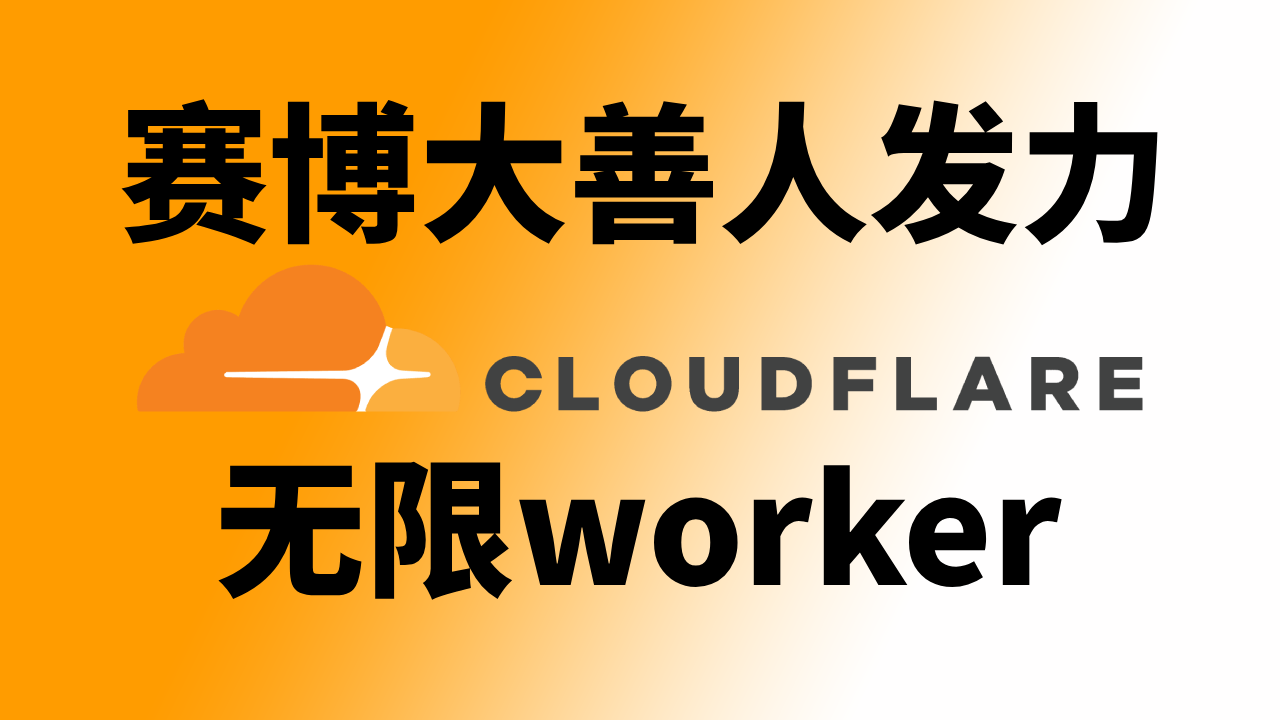
<style>
.page{position:relative;width:1280px;height:720px}
.page>*{position:absolute;margin:0}
.t1{font:150px "SourceHanSansSC-Heavy";color:#000000}
</style>
<div class="page">
<p class="t1" style="left:121px;top:99px;width:1037px;height:147px">赛博大善人发力</p>
<p class="t1" style="left:218px;top:461px;width:844px;height:139px">无限worker</p>
</div>
